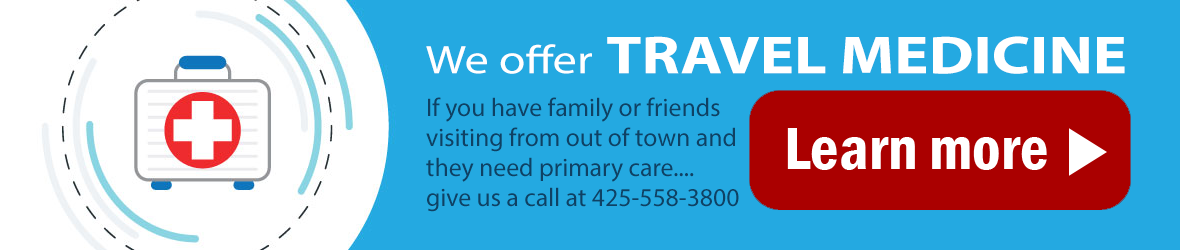
<style>
.page{position:relative;width:1180px;height:250px;background:#24a9e1}
.page>*{position:absolute;margin:0}
.t1{font:53.8px "MyriadPro-Bold";color:#ffffff;scale:1.2 1}
.t2{font:40.2px "MyriadPro-Regular";color:#ffffff;scale:1.2 1}
.t3{font:25.7px/30px "MyriadPro-Regular";color:#0f4164}
</style>
<div class="page">
<p class="t1" style="left:426px;top:36px;width:699px;height:38px"><span class="t2">We offer </span>TRAVEL MEDICINE</p>
<p class="t3" style="left:426px;top:97px;width:313px;height:115px">If you have family or friends <br>visiting from out of town and<br>they need primary care....<br>give us a call at 425-558-3800</p>
</div>
